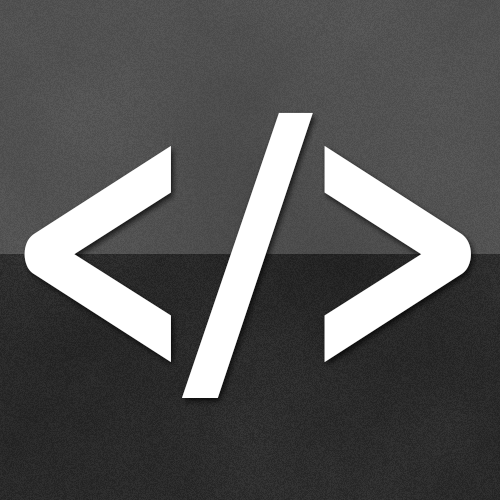
<style>
.page{position:relative;width:500px;height:500px}
.page>*{position:absolute;margin:0}
.t1{font:382.3px "EthnocentricRg-Regular";color:#ffffff;scale:0.72 1}
</style>
<div class="page">
<p class="t1" style="left:24px;top:112px;width:447px;height:286px">&lt;/&gt;</p>
</div>
